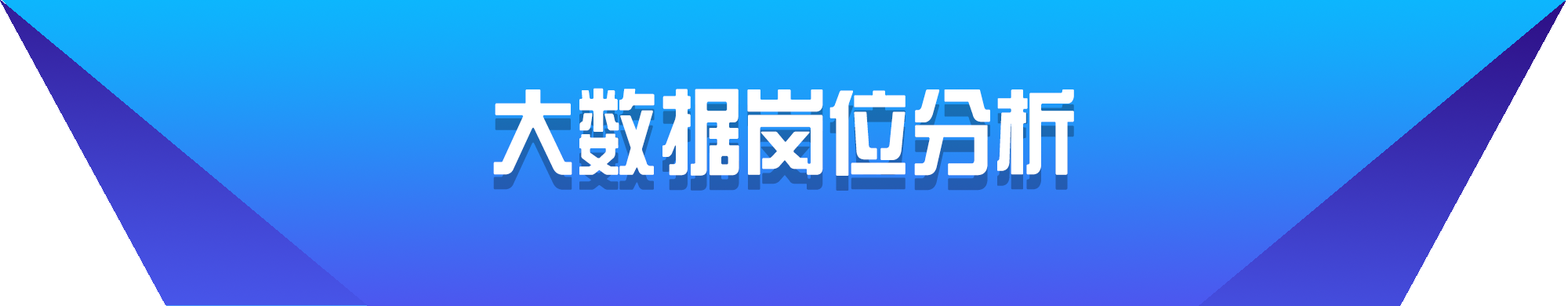
<style>
.page{position:relative;width:1568px;height:306px}
.page>*{position:absolute;margin:0}
.t1{font:89.2px "HGZY_CNKI";color:#ffffff;scale:0.94 1}
</style>
<div class="page">
<p class="t1" style="left:493px;top:88px;width:581px;height:88px">大数据岗位分析</p>
</div>
